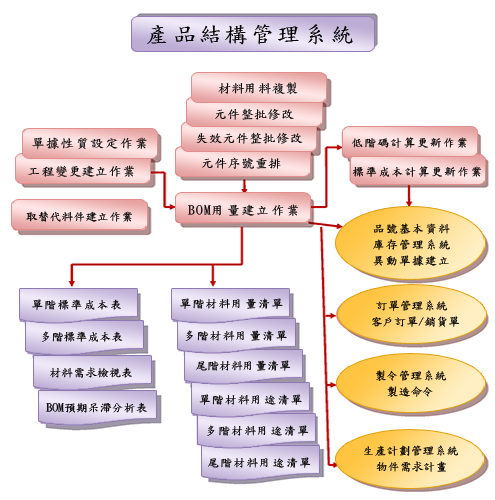
<style>
.page{position:relative;width:495px;height:500px;background:#ffffff}
.page>*{position:absolute;margin:0}
.t1{font:22.2px "DFKaiShu-SB-Estd-BF";letter-spacing:0.1em;color:#000000;scale:1.07 1}
.t2{font:12.5px "DFKaiShu-SB-Estd-BF";color:#000000;scale:1.07 1}
.t3{font:12.5px "DFKaiShu-SB-Estd-BF";letter-spacing:0.1em;color:#000000;scale:1.07 1}
.t4{font:11.1px "DFKaiShu-SB-Estd-BF";letter-spacing:0.1em;color:#000000;scale:1.07 1}
.t5{font:11.1px "DFKaiShu-SB-Estd-BF";color:#000000;scale:1.07 1}
.t6{font:11.1px "DFKaiShu-SB-Estd-BF";letter-spacing:0.1em;scale:1.07 1}
</style>
<div class="page">
<p class="t1" style="left:147px;top:24px;width:206px;height:21px">產品結構管理系統</p>
<p class="t2" style="left:218px;top:82px;width:80px;height:13px">材料用料複製</p>
<p class="t2" style="left:215px;top:108px;width:79px;height:12px">元件整批修改</p>
<p class="t3" style="left:32px;top:137px;width:115px;height:13px">單據性質設定作業</p>
<p class="t2" style="left:196px;top:132px;width:107px;height:12px">失效元件整批修改</p>
<p class="t4" style="left:352px;top:137px;width:115px;height:11px">低階碼計算更新作業</p>
<p class="t2" style="left:202px;top:157px;width:79px;height:12px">元件序號重排</p>
<p class="t2" style="left:28px;top:165px;width:106px;height:12px">工程變更建立作業</p>
<p class="t4" style="left:352px;top:166px;width:129px;height:11px">標準成本計算更新作業</p>
<p class="t3" style="left:188px;top:204px;width:110px;height:12px">BOM用量建立作業</p>
<p class="t5" style="left:26px;top:211px;width:106px;height:11px">取替代料件建立作業</p>
<p class="t4" style="left:373px;top:223px;width:77px;height:11px">品號基本資料</p>
<p class="t4" style="left:373px;top:239px;width:77px;height:11px">庫存管理系統</p>
<p class="t6" style="left:373px;top:255px;width:76px;height:11px">異動單據建立</p>
<p class="t4" style="left:32px;top:299px;width:89px;height:11px">單階標準成本表</p>
<p class="t4" style="left:180px;top:298px;width:103px;height:11px">單階材料用量清單</p>
<p class="t5" style="left:376px;top:300px;width:72px;height:11px">訂單管理系統</p>
<p class="t5" style="left:372px;top:316px;width:88px;height:11px">客戶訂單/銷貨單</p>
<p class="t5" style="left:41px;top:331px;width:82px;height:11px">多階標準成本表</p>
<p class="t4" style="left:185px;top:330px;width:102px;height:11px">多階材料用量清單</p>
<p class="t5" style="left:196px;top:360px;width:95px;height:11px">尾階材料用量清單</p>
<p class="t5" style="left:50px;top:367px;width:82px;height:11px">材料需求檢視表</p>
<p class="t5" style="left:376px;top:370px;width:71px;height:11px">製令管理系統</p>
<p class="t5" style="left:387px;top:386px;width:46px;height:11px">製造命令</p>
<p class="t4" style="left:199px;top:394px;width:103px;height:11px">單階材料用途清單</p>
<p class="t5" style="left:46px;top:402px;width:101px;height:11px">BOM預期呆滯分析表</p>
<p class="t4" style="left:207px;top:425px;width:102px;height:11px">多階材料用途清單</p>
<p class="t5" style="left:364px;top:445px;width:95px;height:11px">生產計劃管理系統</p>
<p class="t4" style="left:208px;top:457px;width:103px;height:11px">尾階材料用途清單</p>
<p class="t5" style="left:376px;top:461px;width:70px;height:11px">物件需求計畫</p>
</div>
